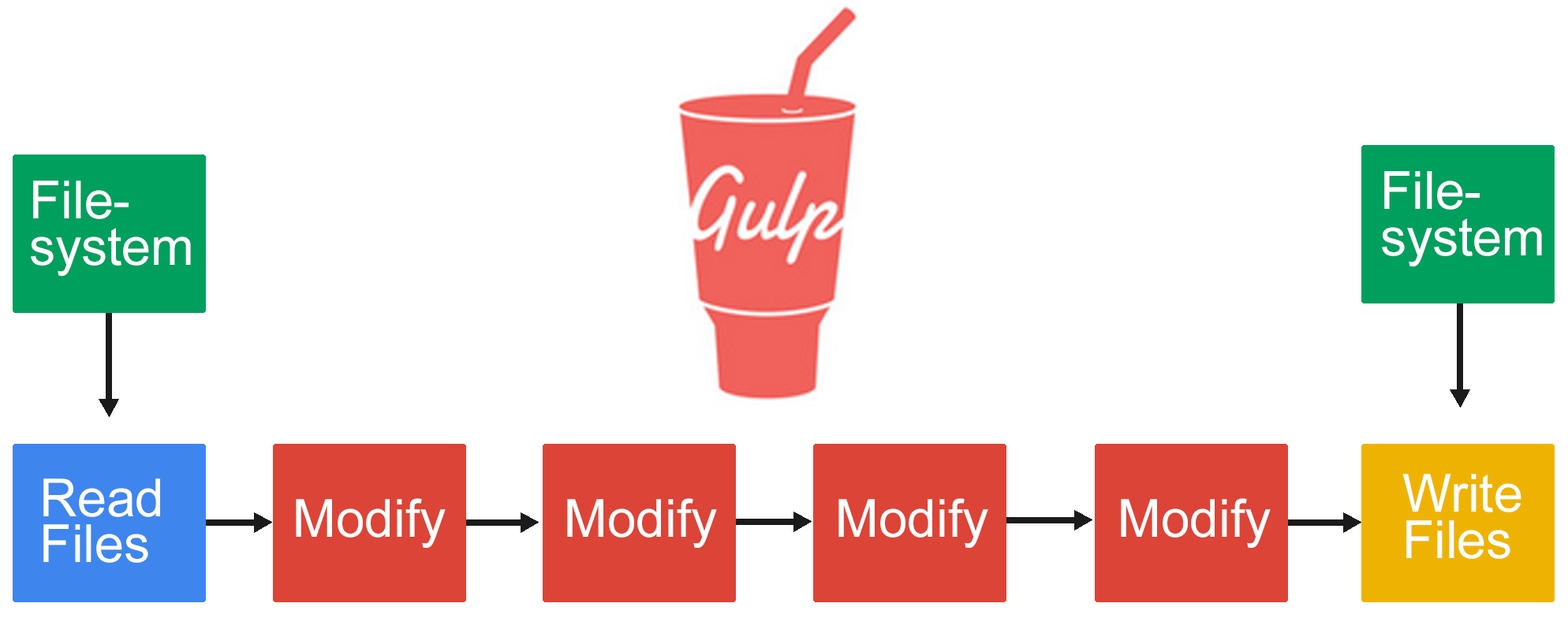
<style>
.page{position:relative;width:1568px;height:618px;background:#ffffff}
.page>*{position:absolute;margin:0}
.t1{font:52.6px/46px "ArialMT";color:#ffffff}
.t2{font:52.6px "ArialMT";color:#ffffff}
</style>
<div class="page">
<p class="t1" style="left:1382px;top:171px;width:160px;height:96px">File-<br>system</p>
<p class="t1" style="left:31px;top:181px;width:160px;height:95px">File-<br>system</p>
<p class="t1" style="left:43px;top:479px;width:117px;height:84px">Read<br>Files</p>
<p class="t1" style="left:1402px;top:474px;width:119px;height:85px">Write<br>Files</p>
<p class="t2" style="left:296px;top:498px;width:150px;height:50px">Modify</p>
<p class="t2" style="left:567px;top:498px;width:150px;height:50px">Modify</p>
<p class="t2" style="left:838px;top:498px;width:150px;height:50px">Modify</p>
<p class="t2" style="left:1121px;top:498px;width:150px;height:50px">Modify</p>
</div>
